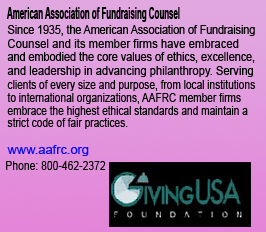
<style>
.page{position:relative;width:266px;height:232px}
.page>*{position:absolute;margin:0}
.t1{font:16.9px "Arial-BoldMT";color:#000000;scale:0.47 1}
.t2{font:12px "ArialMT";color:#000000;scale:0.88 1}
.t3{font:12px "ArialMT";color:#000000;scale:0.94 1}
.t4{font:12px "ArialMT";color:#000000;scale:0.9 1}
.t5{font:12px "ArialMT";color:#000000;scale:0.93 1}
.t6{font:12px "ArialMT";color:#000000;scale:0.84 1}
.t7{font:12px "ArialMT";color:#0b0bf9;scale:1.07 1}
.t8{font:12px "ArialMT";color:#000000;scale:0.86 1}
</style>
<div class="page">
<p class="t1" style="left:6px;top:7px;width:174px;height:15px">American Association of Fundraising Counsel</p>
<p class="t2" style="left:7px;top:25px;width:248px;height:11px">Since 1935, the American Association of Fundraising</p>
<p class="t3" style="left:8px;top:39px;width:231px;height:9px">Counsel and its member firms have embraced</p>
<p class="t4" style="left:7px;top:52px;width:248px;height:11px">and embodied the core values of ethics, excellence,</p>
<p class="t5" style="left:7px;top:66px;width:246px;height:11px">and leadership in advancing philanthropy. Serving</p>
<p class="t6" style="left:7px;top:80px;width:248px;height:11px">clients of every size and purpose, from local institutions</p>
<p class="t6" style="left:7px;top:93px;width:234px;height:11px">to international organizations, AAFRC member firms</p>
<p class="t6" style="left:7px;top:106px;width:241px;height:11px">embrace the highest ethical standards and maintain a</p>
<p class="t6" style="left:7px;top:118px;width:121px;height:11px">strict code of fair practices.</p>
<p class="t7" style="left:7px;top:145px;width:82px;height:11px">www.aafrc.org</p>
<p class="t8" style="left:6px;top:161px;width:100px;height:9px">Phone: 800-462-2372</p>
</div>
